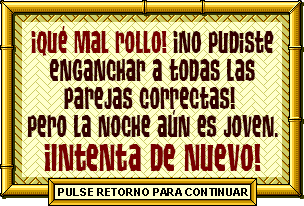
<style>
.page{position:relative;width:304px;height:206px;background:#ffffcc}
.page>*{position:absolute;margin:0}
.t1{font:29.7px/28px "TikiIsland";color:#330000;scale:0.84 1}
.t2{font:29.7px/28px "TikiIsland";color:#770000;scale:0.84 1}
.t3{font:38.6px "TikiIsland";color:#770000;scale:0.84 1}
</style>
<div class="page">
<p class="t1" style="left:27px;top:26px;width:251px;height:111px;text-align:center"><span class="t2">¡Qué mal rollo! </span>¡No pudiste<br>enganchar a todas las<br>parejas correctas! <br>Pero la noche aún es joven.</p>
<p class="t3" style="left:44px;top:144px;width:217px;height:27px">¡Intenta de nuevo!</p>
</div>
